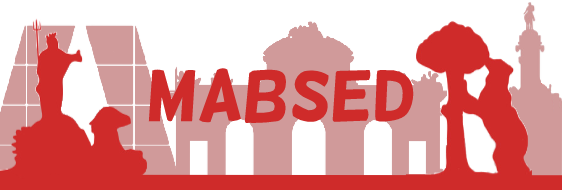
<style>
.page{position:relative;width:562px;height:190px;background:#ffffff}
.page>*{position:absolute;margin:0}
.t1{font:70px "Helsinki";color:#cf2b2a}
</style>
<div class="page">
<p class="t1" style="left:148px;top:68px;width:266px;height:55px">MABSED</p>
</div>
